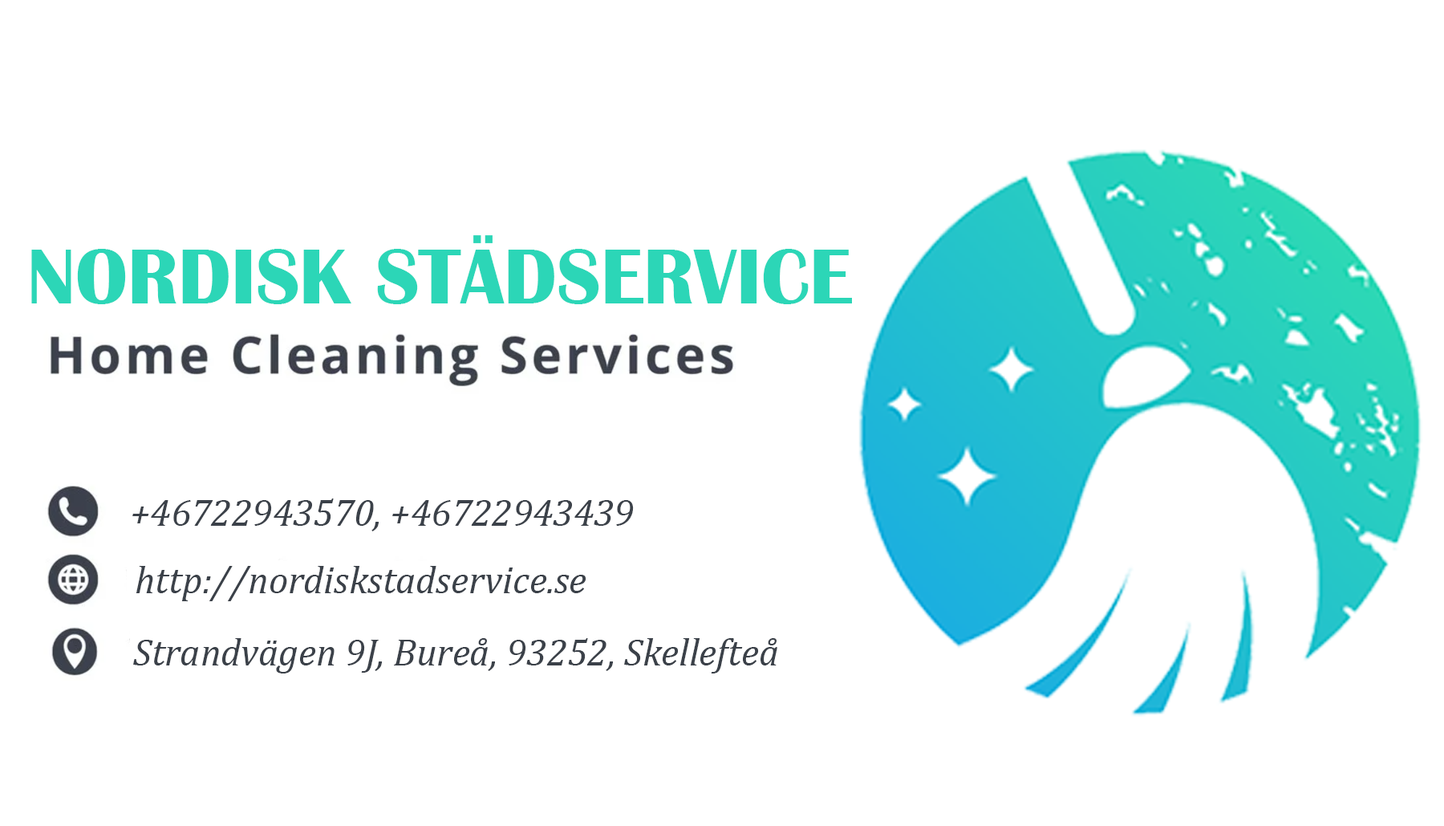
<style>
.page{position:relative;width:1444px;height:826px;background:#ffffff}
.page>*{position:absolute;margin:0}
.t1{font:80.2px "BritannicBold";color:#2cd6b7}
.t2{font:38.5px "Cambria-Italic";color:#3b4149}
</style>
<div class="page">
<p class="t1" style="left:31px;top:249px;width:821px;height:55px">NORDISK STADSERVICE</p>
<p class="t2" style="left:132px;top:498px;width:502px;height:33px">+46722943570, +46722943439</p>
<p class="t2" style="left:136px;top:566px;width:451px;height:35px">http://nordiskstadservice.se</p>
<p class="t2" style="left:133px;top:638px;width:644px;height:35px">Strandvägen 9J, Bureå, 93252, Skellefteå</p>
</div>
